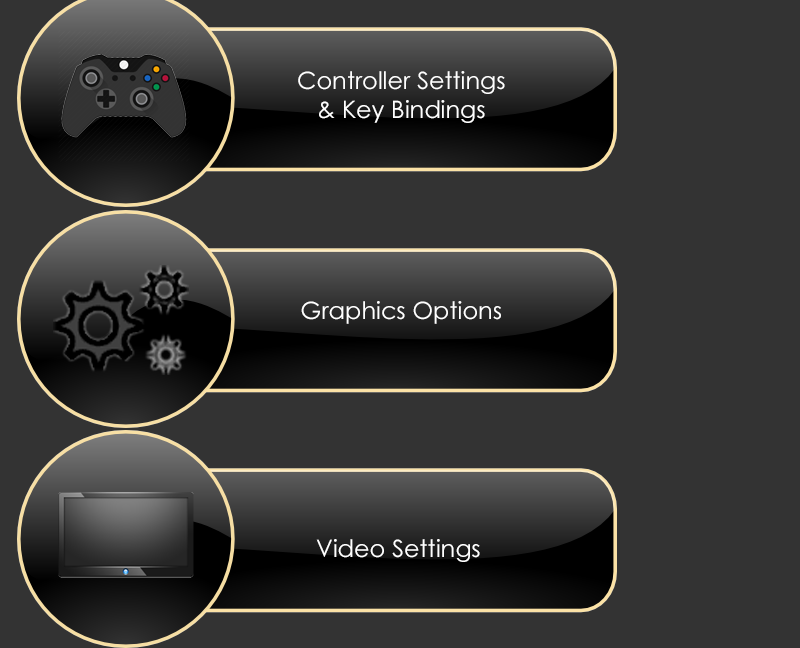
<style>
.page{position:relative;width:800px;height:648px;background:#333333}
.page>*{position:absolute;margin:0}
.t1{font:24px "CenturyGothic";color:#ffffff}
</style>
<div class="page">
<p class="t1" style="left:298px;top:71px;width:207px;height:52px;text-align:center">Controller Settings<br>&amp; Key Bindings</p>
<p class="t1" style="left:301px;top:301px;width:200px;height:23px">Graphics Options</p>
<p class="t1" style="left:316px;top:539px;width:164px;height:23px">Video Settings</p>
</div>
